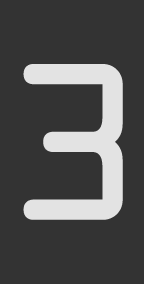
<style>
.page{position:relative;width:144px;height:284px;background:#333333}
.page>*{position:absolute;margin:0}
.t1{font:200px "OCRAStd";color:#e3e3e3}
</style>
<div class="page">
<p class="t1" style="left:23px;top:64px;width:100px;height:156px">3</p>
</div>
